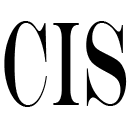
<style>
.page{position:relative;width:128px;height:128px;background:#ffffff}
.page>*{position:absolute;margin:0}
.t1{font:120.3px "EngraversMT";color:#000000;scale:0.49 1}
</style>
<div class="page">
<p class="t1" style="left:4px;top:21px;width:123px;height:86px">CIS</p>
</div>
